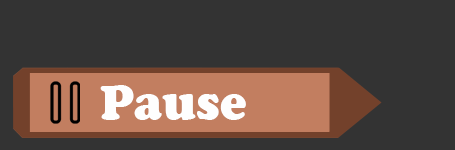
<style>
.page{position:relative;width:455px;height:150px;background:#333333}
.page>*{position:absolute;margin:0}
.t1{font:50px "CooperBlack";color:#fefefe}
</style>
<div class="page">
<p class="t1" style="left:100px;top:85px;width:146px;height:35px">Pause</p>
</div>
